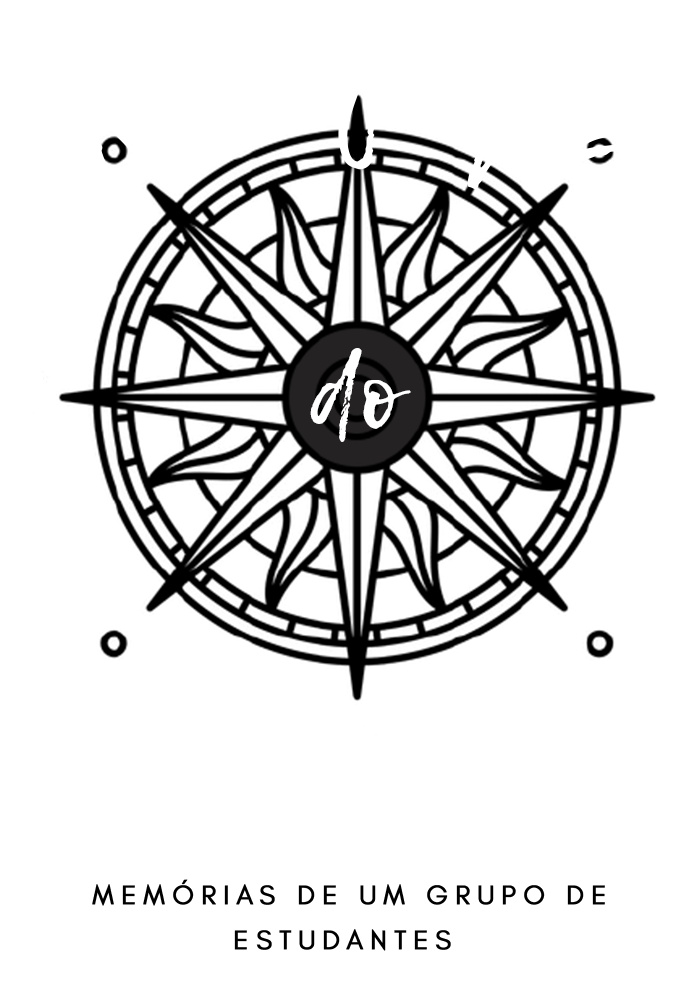
<style>
.page{position:relative;width:698px;height:991px;background:#ffffff}
.page>*{position:absolute;margin:0}
.t1{font:27.2px/44.6px "GlacialIndifference-Regular";letter-spacing:0.24em;color:#000000;font-weight:bold}
</style>
<div class="page">
<p class="t1" style="left:92px;top:879px;width:513px;height:72px;text-align:center">MEMÓRIAS DE UM GRUPO DE<br>ESTUDANTES</p>
</div>
